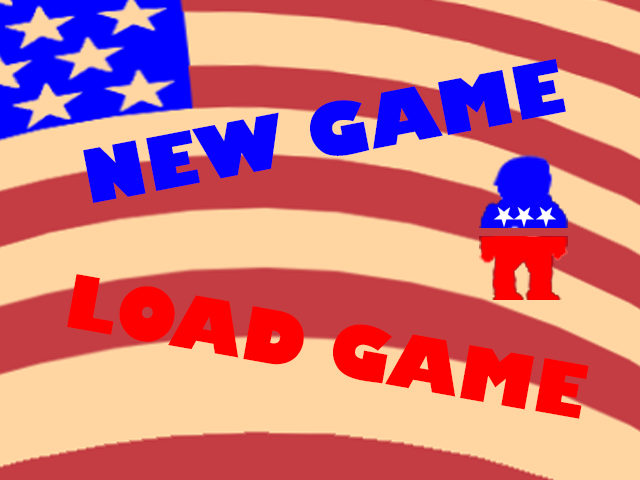
<style>
.page{position:relative;width:640px;height:480px;background:#ffd5a2}
.page>*{position:absolute;margin:0}
.t1{font:72px "GillSans-UltraBold";color:#0600ff}
.t2{font:72px "GillSans-UltraBold";color:#ff0000}
</style>
<div class="page">
<p class="t1" style="left:83px;top:59px;width:483px;height:144px;rotate:-11deg">NEW GAME</p>
<p class="t2" style="left:67px;top:274px;width:522px;height:145px;rotate:10deg">LOAD GAME</p>
</div>
